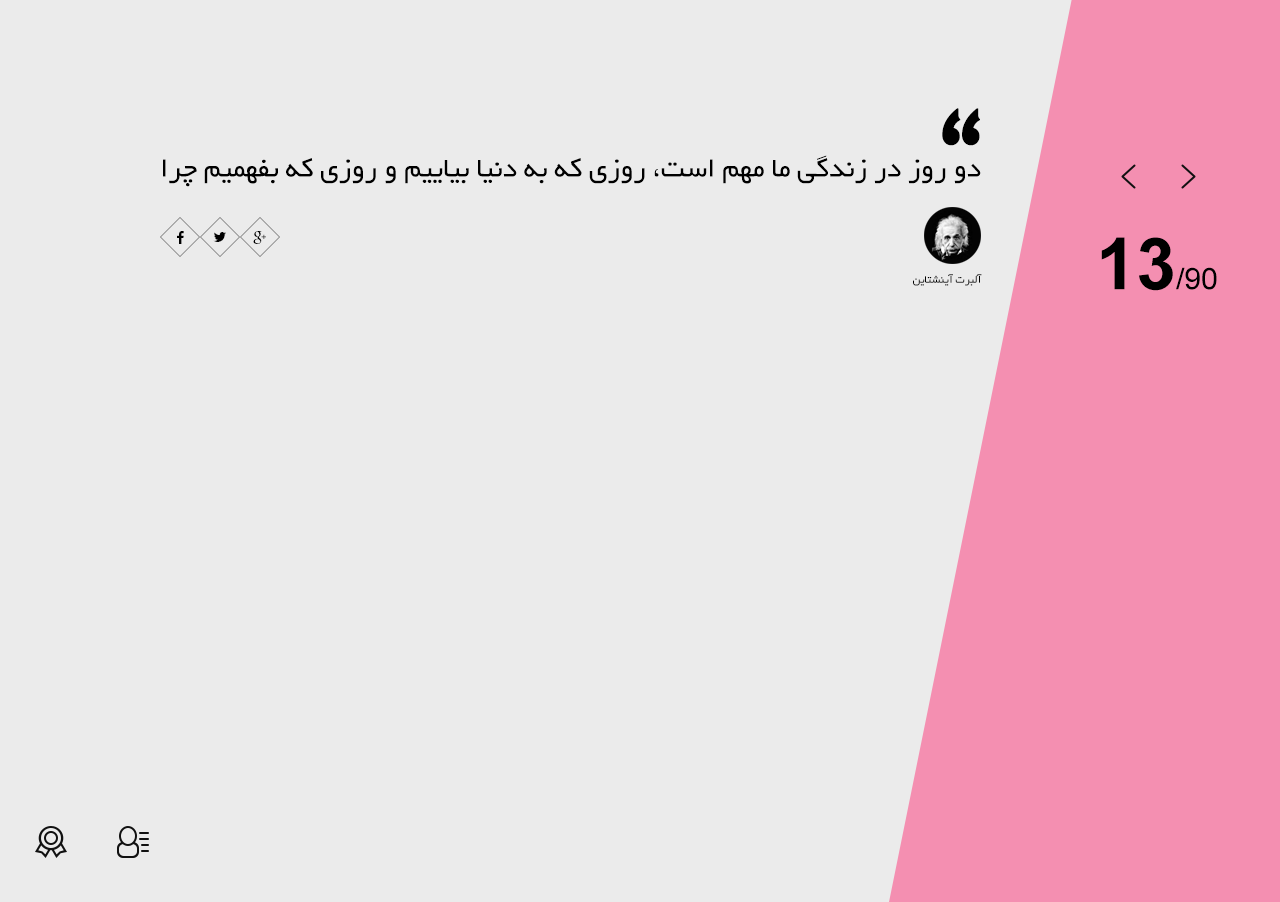
<style>
.page{position:relative;width:1280px;height:902px;background:#ebebeb}
.page>*{position:absolute;margin:0}
.t1{font:150px "Persian-EntezareZohoor1**";color:#000000;font-weight:bold}
.t2{font:30px "BYekan";color:#000000}
.t3{font:30px "ArialMT";color:#000000}
.t4{font:72px "Arial-BoldMT";color:#000000}
.t5{font:12px "BYekan";color:#000000}
</style>
<div class="page">
<p class="t1" style="left:942px;top:108px;width:38px;height:38px">”</p>
<p class="t2" style="left:163px;top:155px;width:818px;height:32px">دو روز در زندگی ما مهم است، روزی که به دنیا بیاییم و روزی که بفهمیم چرا</p>
<p class="t3" style="left:1101px;top:237px;width:116px;height:54px"><span class="t4">13</span>/90</p>
<p class="t5" style="left:913px;top:274px;width:69px;height:12px">آلبرت آینشتاین</p>
</div>
